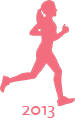
<style>
.page{position:relative;width:75px;height:121px;background:#ffffff}
.page>*{position:absolute;margin:0}
.t1{font:18px "Actor-Regular";color:#f26d7d;text-transform:uppercase}
</style>
<div class="page">
<p class="t1" style="left:22px;top:106px;width:33px;height:12px">2013</p>
</div>
